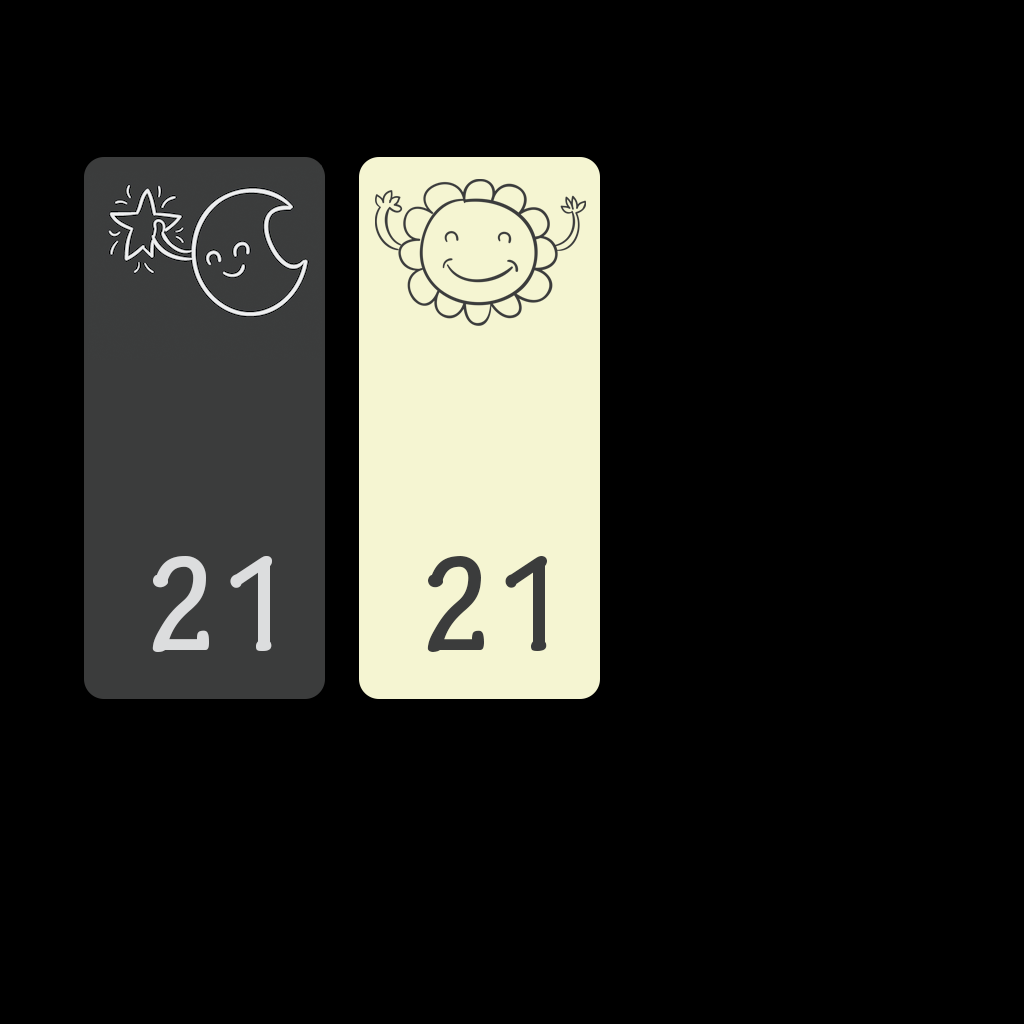
<style>
.page{position:relative;width:1024px;height:1024px;background:#000000}
.page>*{position:absolute;margin:0}
.t1{font:144px "TektonPro-BoldCond";color:#dcddde}
.t2{font:144px "TektonPro-BoldCond";color:#3b3c3c}
</style>
<div class="page">
<p class="t1" style="left:152px;top:556px;width:120px;height:96px">21</p>
<p class="t2" style="left:427px;top:556px;width:120px;height:96px">21</p>
</div>
